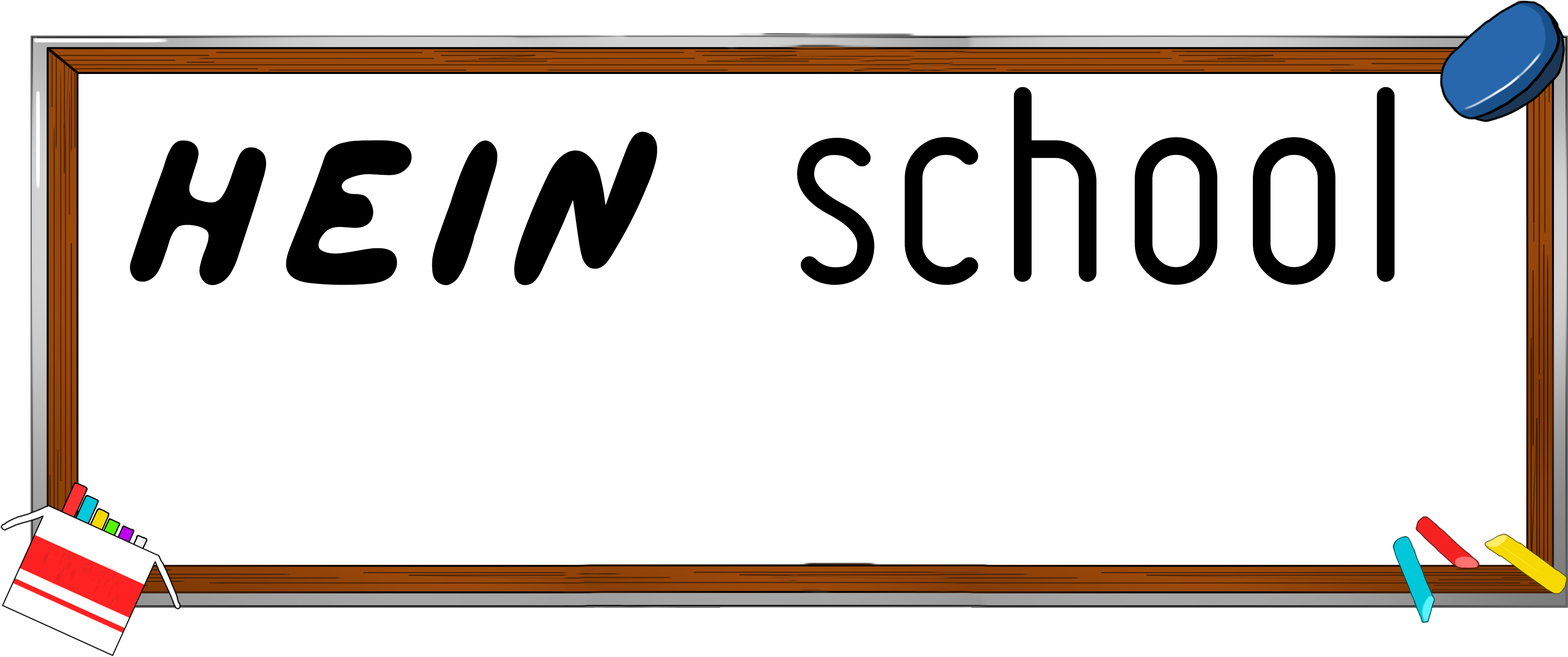
<style>
.page{position:relative;width:1568px;height:657px;background:#ffffff}
.page>*{position:absolute;margin:0}
.t1{font:206.5px "Ruler";color:#000000}
.t2{font:206.5px "MarkerBoldRegular";color:#000000}
</style>
<div class="page">
<p class="t1" style="left:797px;top:87px;width:598px;height:198px">school</p>
<p class="t2" style="left:130px;top:131px;width:527px;height:154px">hein</p>
</div>
